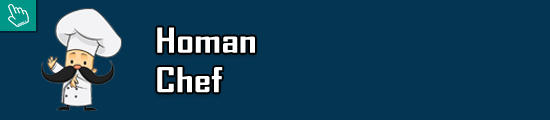
<style>
.page{position:relative;width:550px;height:120px;background:#043654}
.page>*{position:absolute;margin:0}
.t1{font:32.9px "AgencyFB-Bold";color:#ffffff;scale:1.33 1}
</style>
<div class="page">
<p class="t1" style="left:157px;top:27px;width:98px;height:66px">Homan <br>Chef</p>
</div>
